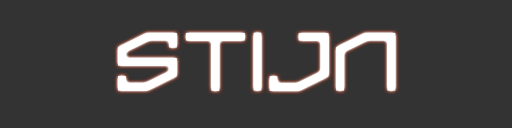
<style>
.page{position:relative;width:512px;height:128px;background:#333333}
.page>*{position:absolute;margin:0}
.t1{font:82px "KinineAlpha";color:#ffffff}
</style>
<div class="page">
<p class="t1" style="left:118px;top:32px;width:278px;height:59px">Stijn</p>
</div>
